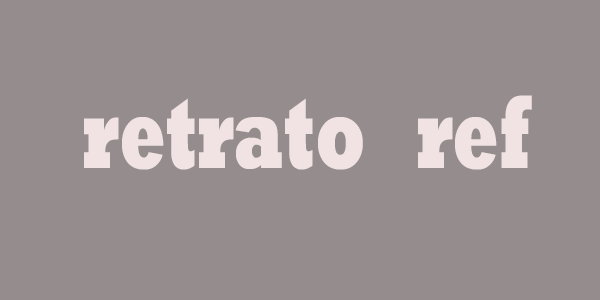
<style>
.page{position:relative;width:600px;height:300px;background:#958d8d}
.page>*{position:absolute;margin:0}
.t1{font:104.6px "Rockwell-ExtraBold";color:#f1e3e3;scale:0.65 1}
</style>
<div class="page">
<p class="t1" style="left:84px;top:95px;width:448px;height:75px">retrato   ref</p>
</div>
